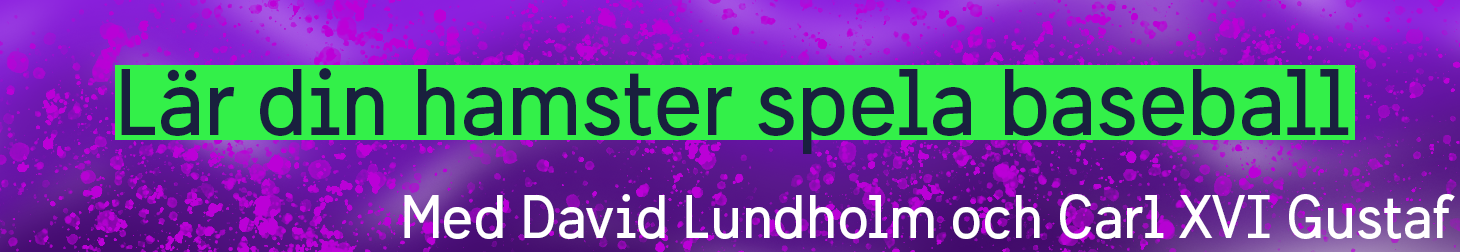
<style>
.page{position:relative;width:1460px;height:252px}
.page>*{position:absolute;margin:0}
.t1{font:93.3px "SwedenSans";color:#19203e}
.t2{font:60px "SwedenSans";color:#ffffff}
</style>
<div class="page">
<p class="t1" style="left:121px;top:68px;width:1228px;height:86px">Lär din hamster spela baseball</p>
<p class="t2" style="left:404px;top:194px;width:1051px;height:45px">Med David Lundholm och Carl XVI Gustaf</p>
</div>
